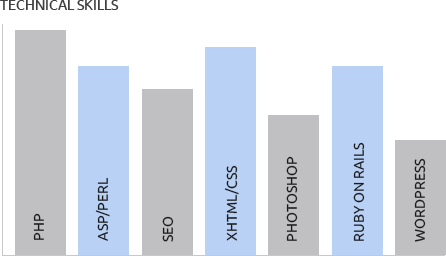
<style>
.page{position:relative;width:446px;height:256px;background:#ffffff}
.page>*{position:absolute;margin:0}
.t1{font:14px "Ubuntu";color:#3f3f41;text-transform:uppercase}
.t2{font:14px "Ubuntu";color:#1b1b1b;text-transform:uppercase}
</style>
<div class="page">
<p class="t1" style="left:0px;top:0px;width:119px;height:10px">technical skills</p>
<p class="t2" style="left:353px;top:142px;width:12px;height:99px;rotate:-90deg">ruby on rails</p>
<p class="t2" style="left:286px;top:156px;width:12px;height:85px;rotate:-90deg">photoshop</p>
<p class="t2" style="left:414px;top:158px;width:12px;height:84px;rotate:-90deg">wordpress</p>
<p class="t2" style="left:224px;top:165px;width:15px;height:76px;rotate:-90deg">xhtml/css</p>
<p class="t2" style="left:95px;top:177px;width:15px;height:64px;rotate:-90deg">asp/perl</p>
<p class="t2" style="left:33px;top:213px;width:11px;height:27px;rotate:-90deg">php</p>
<p class="t2" style="left:162px;top:216px;width:12px;height:26px;rotate:-90deg">seo</p>
</div>
